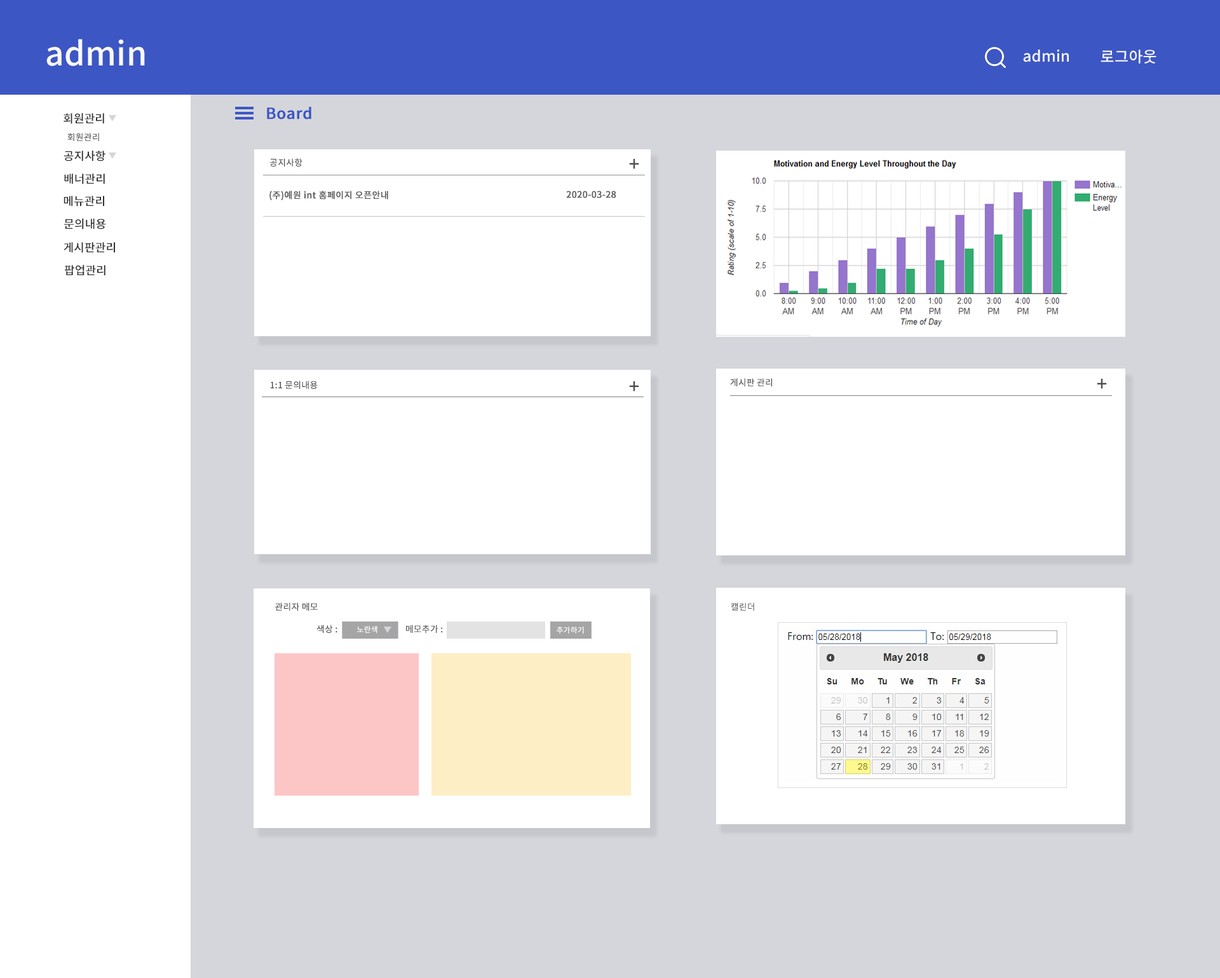
<style>
.page{position:relative;width:1220px;height:978px;background:#ffffff}
.page>*{position:absolute;margin:0}
.t1{font:32.9px "NotoSansKR-Medium";letter-spacing:0.01em;color:#f8f8f8}
.t2{font:15.2px "NotoSansKR-Medium";letter-spacing:0.01em;color:#f8f8f8}
.t3{font:11.4px "NotoSansKR-Medium";letter-spacing:0.01em;color:#303030}
.t4{font:15.2px "NotoSansKR-Medium";letter-spacing:0.01em;color:#3c56c4;font-weight:bold}
.t5{font:8.9px "NotoSansKR-Medium";letter-spacing:0.01em;color:#4a4949}
.t6{font:8.9px "NotoSansKR-Medium";letter-spacing:0.01em;color:#464646}
.t7{font:19.1px "NotoSansKR-Medium";letter-spacing:0.01em;color:#4d4d4d}
.t8{font:8.9px "NotoSansKR-Medium";letter-spacing:0.01em;color:#616161;font-weight:bold}
.t9{font:8.9px "NotoSansKR-Medium";letter-spacing:0.01em;color:#5b5b5b}
.t10{font:7.6px "NotoSansKR-Medium";letter-spacing:0.01em;color:#ffffff}
.t11{font:8.9px "NotoSansKR-Medium";letter-spacing:0.01em;color:#505050}
.t12{font:7.6px "NotoSansKR-Medium";letter-spacing:0.01em;color:#fffefe}
</style>
<div class="page">
<p class="t1" style="left:46px;top:39px;width:99px;height:27px">admin</p>
<p class="t2" style="left:1023px;top:50px;width:45px;height:12px">admin</p>
<p class="t2" style="left:1100px;top:50px;width:56px;height:14px">로그아웃</p>
<p class="t3" style="left:64px;top:113px;width:40px;height:11px">회원관리</p>
<p class="t4" style="left:267px;top:107px;width:44px;height:12px">Board</p>
<p class="t5" style="left:67px;top:133px;width:32px;height:8px">회원관리</p>
<p class="t3" style="left:64px;top:151px;width:41px;height:10px">공지사항</p>
<p class="t6" style="left:269px;top:158px;width:33px;height:8px">공지사항</p>
<p class="t7" style="left:629px;top:159px;width:10px;height:10px">+</p>
<p class="t3" style="left:64px;top:173px;width:41px;height:11px">배너관리</p>
<p class="t3" style="left:64px;top:196px;width:40px;height:10px">메뉴관리</p>
<p class="t8" style="left:269px;top:191px;width:119px;height:9px">(주)예원 int 홈페이지 오픈안내</p>
<p class="t8" style="left:566px;top:191px;width:50px;height:7px">2020-03-28</p>
<p class="t3" style="left:64px;top:219px;width:42px;height:10px">문의내용</p>
<p class="t3" style="left:64px;top:242px;width:51px;height:11px">게시판관리</p>
<p class="t3" style="left:64px;top:265px;width:41px;height:11px">팝업관리</p>
<p class="t6" style="left:730px;top:378px;width:42px;height:9px">게시판 관리</p>
<p class="t6" style="left:270px;top:381px;width:48px;height:8px">1:1 문의내용</p>
<p class="t7" style="left:629px;top:381px;width:10px;height:10px">+</p>
<p class="t7" style="left:1096px;top:379px;width:11px;height:10px">+</p>
<p class="t6" style="left:275px;top:602px;width:43px;height:8px">관리자 메모</p>
<p class="t9" style="left:731px;top:602px;width:23px;height:8px">캘린더</p>
<p class="t6" style="left:316px;top:624px;width:21px;height:9px">색상 :</p>
<p class="t10" style="left:357px;top:626px;width:20px;height:7px">노란색</p>
<p class="t11" style="left:406px;top:624px;width:37px;height:9px">메모추가 :</p>
<p class="t12" style="left:556px;top:626px;width:28px;height:7px">추가하기</p>
</div>
